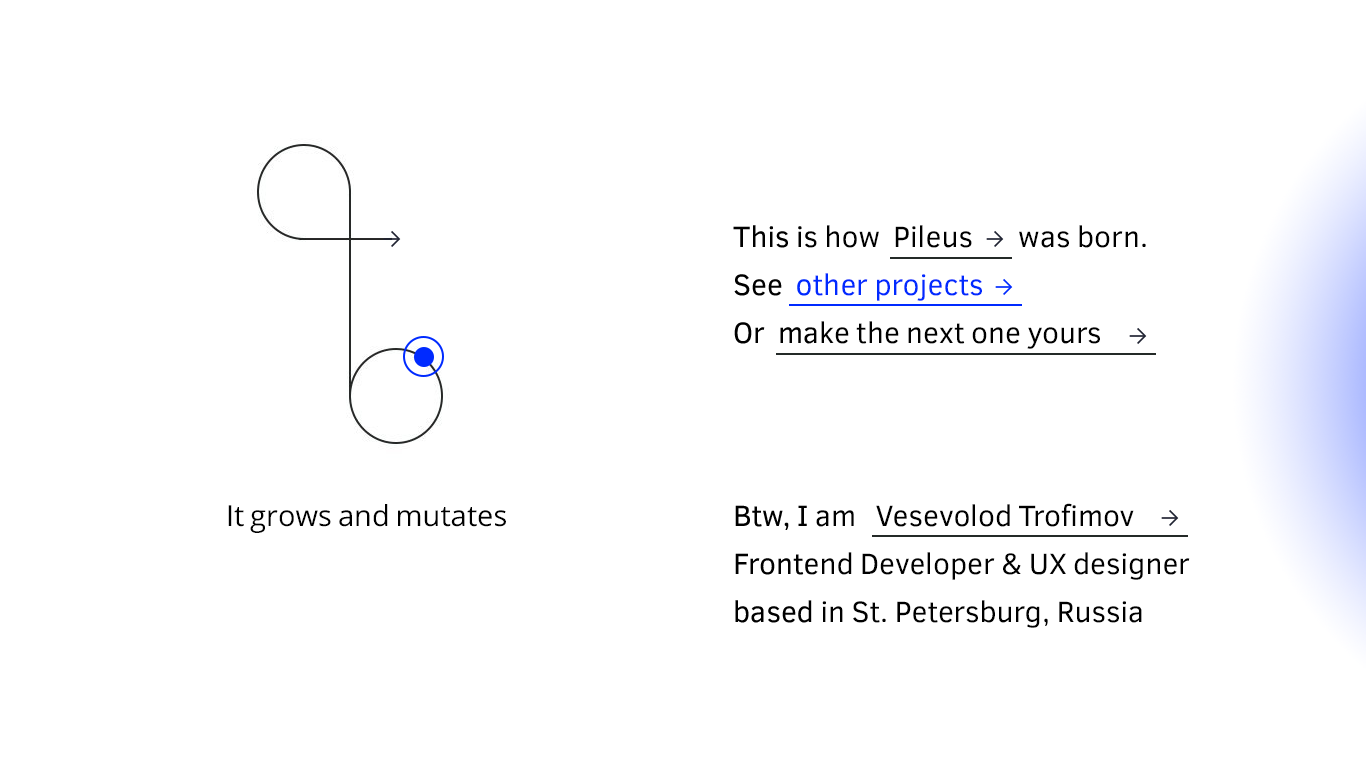
<style>
.page{position:relative;width:1366px;height:768px;background:#ffffff}
.page>*{position:absolute;margin:0}
.t1{font:30px/48px "ClearSans";color:#000000}
.t2{font:30px/48px "ClearSans";color:#002aff}
.t3{font:29px "OpenSans";color:#000000}
</style>
<div class="page">
<p class="t1" style="left:733px;top:225px;width:413px;height:124px">This is how  Pileus       was born.<br>See  <span class="t2">other projects<br></span>Or  make the next one yours</p>
<p class="t3" style="left:228px;top:504px;width:278px;height:29px">It grows and mutates</p>
<p class="t1" style="left:735px;top:503px;width:455px;height:125px">Btw, I am   Vesevolod Trofimov<br>Frontend Developer &amp; UX designer <br>based in St. Petersburg, Russia</p>
</div>
